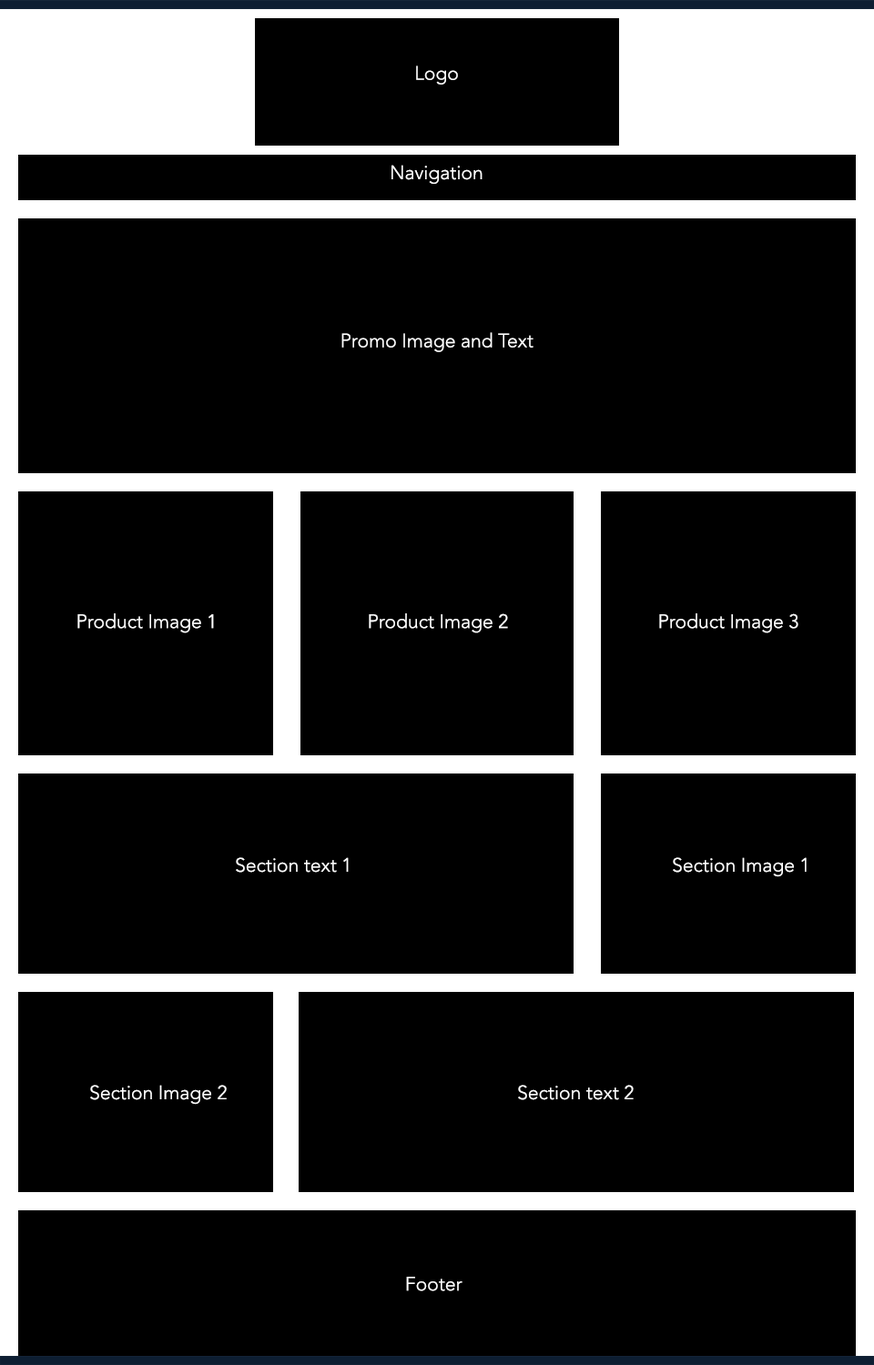
<style>
.page{position:relative;width:874px;height:1365px;background:#000000}
.page>*{position:absolute;margin:0}
.t1{font:19.3px "Avenir-Light";color:#ffffff}
</style>
<div class="page">
<p class="t1" style="left:416px;top:66px;width:42px;height:19px">Logo</p>
<p class="t1" style="left:391px;top:165px;width:91px;height:19px">Navigation</p>
<p class="t1" style="left:341px;top:332px;width:192px;height:20px">Promo Image and Text</p>
<p class="t1" style="left:77px;top:613px;width:137px;height:20px">Product Image 1</p>
<p class="t1" style="left:369px;top:613px;width:139px;height:20px">Product Image 2</p>
<p class="t1" style="left:659px;top:613px;width:139px;height:20px">Product Image 3</p>
<p class="t1" style="left:236px;top:857px;width:113px;height:16px">Section text 1</p>
<p class="t1" style="left:672px;top:857px;width:134px;height:20px">Section Image 1</p>
<p class="t1" style="left:90px;top:1085px;width:137px;height:20px">Section Image 2</p>
<p class="t1" style="left:518px;top:1085px;width:115px;height:15px">Section text 2</p>
<p class="t1" style="left:406px;top:1277px;width:56px;height:14px">Footer</p>
</div>
